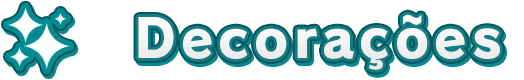
<style>
.page{position:relative;width:524px;height:80px;background:#ffffff}
.page>*{position:absolute;margin:0}
.t1{font:52px "RodinPro-EB";letter-spacing:0.101em;color:#f2f3f3}
</style>
<div class="page">
<p class="t1" style="left:138px;top:14px;width:362px;height:56px">Decorações</p>
</div>
